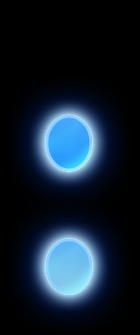
<style>
.page{position:relative;width:140px;height:335px;background:#000000}
.page>*{position:absolute;margin:0}
.t1{font:360px "AGBookRounded-Medium";letter-spacing:0.025em;scale:0.83 1}
</style>
<div class="page">
<p class="t1" style="left:45px;top:114px;width:48px;height:181px">:</p>
<p class="t1" style="left:45px;top:114px;width:48px;height:181px">:</p>
<p class="t1" style="left:45px;top:114px;width:48px;height:181px">:</p>
</div>
